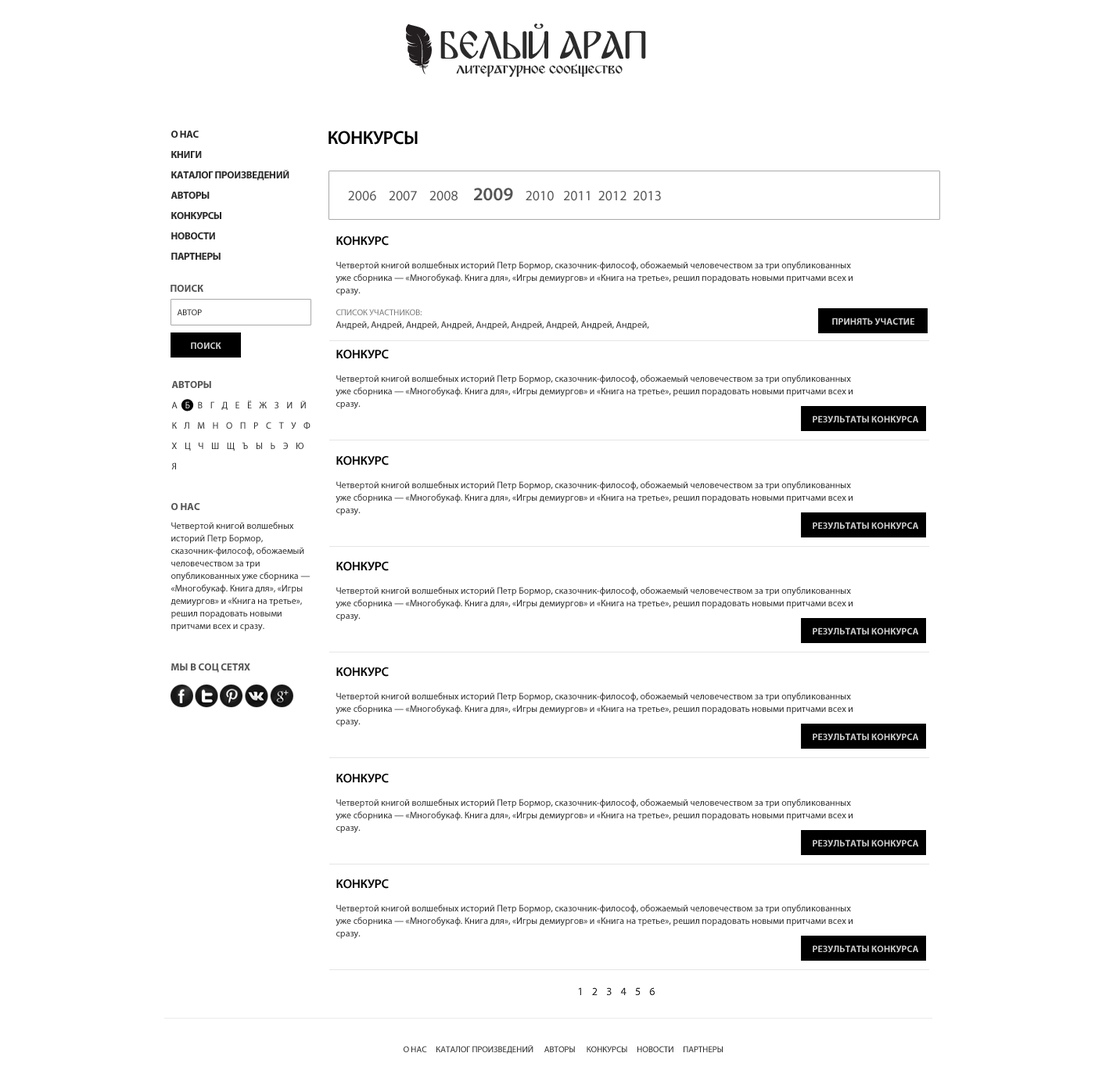
<style>
.page{position:relative;width:1095px;height:1089px;background:#ffffff}
.page>*{position:absolute;margin:0}
.t1{font:40.3px "BulgariaModernaV3";color:#2c2b2b;text-transform:uppercase}
.t2{font:17.2px "BulgariaModernaV3";color:#2c2b2b}
.t3{font:10.2px/20.3px "MyriadPro-Bold";letter-spacing:-0.025em;color:#2c2b2b;text-transform:uppercase}
.t4{font:18.8px "MyriadPro-Semibold";letter-spacing:-0.025em;color:#000000;text-transform:uppercase}
.t5{font:14.1px "MyriadPro-Regular";color:#565555;text-transform:uppercase}
.t6{font:18.8px "MyriadPro-Semibold";color:#565555;text-transform:uppercase}
.t7{font:12.5px "MyriadPro-Semibold";color:#000000;text-transform:uppercase}
.t8{font:9.4px/12.5px "MyriadPro-Regular";color:#2c2b2b}
.t9{font:10.2px "MyriadPro-Bold";color:#565555;text-transform:uppercase}
.t10{font:8.6px "MyriadPro-Regular";color:#2c2b2b;text-transform:uppercase}
.t11{font:8.6px "MyriadPro-Regular";color:#7a7a7a;text-transform:uppercase}
.t12{font:9.4px "MyriadPro-Bold";color:#cccccc;text-transform:uppercase}
.t13{font:9.4px "MyriadPro-Regular";color:#2c2b2b}
.t14{font:9.4px/20.3px "MyriadPro-Regular";letter-spacing:0.8em;color:#2c2b2b;text-transform:uppercase}
.t15{font:9.4px/20.3px "MyriadPro-Regular";letter-spacing:0.8em;color:#ffffff;text-transform:uppercase}
</style>
<div class="page">
<p class="t1" style="left:440px;top:23px;width:206px;height:36px">Белый Арап</p>
<p class="t2" style="left:456px;top:63px;width:167px;height:14px">литературное сообщество</p>
<p class="t3" style="left:171px;top:131px;width:118px;height:129px">о нас<br>книги<br>каталог произведений<br>авторы<br>конкурсы<br>новости <br>партнеры</p>
<p class="t4" style="left:329px;top:131px;width:89px;height:14px">конкурсы</p>
<p class="t5" style="left:348px;top:188px;width:313px;height:13px">2006    2007    2008     <span class="t6">2009</span>    2010   2011  2012  2013</p>
<p class="t7" style="left:336px;top:236px;width:53px;height:10px">конкурс</p>
<p class="t8" style="left:336px;top:261px;width:517px;height:35px">Четвертой книгой волшебных историй Петр Бормор, сказочник-философ, обожаемый человечеством за три опубликованных уже сборника — «Многобукаф. Книга для», «Игры демиургов» и «Книга на третье», решил порадовать новыми притчами всех и сразу.<br>«Запасная книжка» — это сказки с изрядной долей светлого юмора и мудрости для читателя любого роста.</p>
<p class="t9" style="left:171px;top:285px;width:32px;height:7px">поиск</p>
<p class="t10" style="left:177px;top:309px;width:25px;height:6px">автор</p>
<p class="t11" style="left:336px;top:309px;width:86px;height:6px">список участников:</p>
<p class="t12" style="left:832px;top:318px;width:82px;height:7px">принять участие</p>
<p class="t13" style="left:336px;top:321px;width:313px;height:9px">Андрей, Андрей, Андрей, Андрей, Андрей, Андрей, Андрей, Андрей, Андрей,</p>
<p class="t12" style="left:191px;top:342px;width:30px;height:7px">поиск</p>
<p class="t7" style="left:336px;top:350px;width:53px;height:9px">конкурс</p>
<p class="t8" style="left:336px;top:375px;width:517px;height:34px">Четвертой книгой волшебных историй Петр Бормор, сказочник-философ, обожаемый человечеством за три опубликованных уже сборника — «Многобукаф. Книга для», «Игры демиургов» и «Книга на третье», решил порадовать новыми притчами всех и сразу.<br>«Запасная книжка» — это сказки с изрядной долей светлого юмора и мудрости для читателя любого роста.</p>
<p class="t9" style="left:171px;top:381px;width:40px;height:7px">авторы</p>
<p class="t14" style="left:171px;top:401px;width:140px;height:68px">А<span class="t15">Б</span>ВГДЕЁЖЗИЙКЛМНОПРСТУФХЦЧШЩЪЫЬЭЮЯ</p>
<p class="t12" style="left:813px;top:415px;width:106px;height:8px">результаты конкурса</p>
<p class="t7" style="left:336px;top:456px;width:53px;height:9px">конкурс</p>
<p class="t8" style="left:336px;top:481px;width:517px;height:34px">Четвертой книгой волшебных историй Петр Бормор, сказочник-философ, обожаемый человечеством за три опубликованных уже сборника — «Многобукаф. Книга для», «Игры демиургов» и «Книга на третье», решил порадовать новыми притчами всех и сразу.<br>«Запасная книжка» — это сказки с изрядной долей светлого юмора и мудрости для читателя любого роста.</p>
<p class="t9" style="left:171px;top:503px;width:29px;height:7px">о нас</p>
<p class="t8" style="left:171px;top:522px;width:139px;height:109px">Четвертой книгой волшебных историй Петр Бормор, сказочник-философ, обожаемый человечеством за три опубликованных уже сборника — «Многобукаф. Книга для», «Игры демиургов» и «Книга на третье», решил порадовать новыми притчами всех и сразу.<br>«Запасная книжка» — это сказки с изрядной долей светлого юмора и мудрости для читателя любого роста.</p>
<p class="t12" style="left:813px;top:522px;width:106px;height:8px">результаты конкурса</p>
<p class="t7" style="left:336px;top:562px;width:53px;height:9px">конкурс</p>
<p class="t8" style="left:336px;top:587px;width:517px;height:34px">Четвертой книгой волшебных историй Петр Бормор, сказочник-философ, обожаемый человечеством за три опубликованных уже сборника — «Многобукаф. Книга для», «Игры демиургов» и «Книга на третье», решил порадовать новыми притчами всех и сразу.<br>«Запасная книжка» — это сказки с изрядной долей светлого юмора и мудрости для читателя любого роста.</p>
<p class="t12" style="left:813px;top:627px;width:106px;height:8px">результаты конкурса</p>
<p class="t9" style="left:171px;top:663px;width:79px;height:10px">мы в соц сетях</p>
<p class="t7" style="left:336px;top:667px;width:53px;height:10px">конкурс</p>
<p class="t8" style="left:336px;top:692px;width:517px;height:35px">Четвертой книгой волшебных историй Петр Бормор, сказочник-философ, обожаемый человечеством за три опубликованных уже сборника — «Многобукаф. Книга для», «Игры демиургов» и «Книга на третье», решил порадовать новыми притчами всех и сразу.<br>«Запасная книжка» — это сказки с изрядной долей светлого юмора и мудрости для читателя любого роста.</p>
<p class="t12" style="left:813px;top:733px;width:106px;height:8px">результаты конкурса</p>
<p class="t7" style="left:336px;top:774px;width:53px;height:9px">конкурс</p>
<p class="t8" style="left:336px;top:799px;width:517px;height:34px">Четвертой книгой волшебных историй Петр Бормор, сказочник-философ, обожаемый человечеством за три опубликованных уже сборника — «Многобукаф. Книга для», «Игры демиургов» и «Книга на третье», решил порадовать новыми притчами всех и сразу.<br>«Запасная книжка» — это сказки с изрядной долей светлого юмора и мудрости для читателя любого роста.</p>
<p class="t12" style="left:813px;top:839px;width:106px;height:8px">результаты конкурса</p>
<p class="t7" style="left:336px;top:879px;width:53px;height:10px">конкурс</p>
<p class="t8" style="left:336px;top:904px;width:517px;height:35px">Четвертой книгой волшебных историй Петр Бормор, сказочник-философ, обожаемый человечеством за три опубликованных уже сборника — «Многобукаф. Книга для», «Игры демиургов» и «Книга на третье», решил порадовать новыми притчами всех и сразу.<br>«Запасная книжка» — это сказки с изрядной долей светлого юмора и мудрости для читателя любого роста.</p>
<p class="t12" style="left:813px;top:945px;width:106px;height:8px">результаты конкурса</p>
<p class="t10" style="left:404px;top:1045px;width:319px;height:9px">о нас     каталог произведений      авторы      конкурсы     новости     партнеры</p>
</div>
